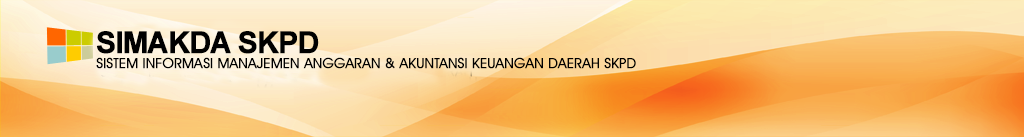
<style>
.page{position:relative;width:1024px;height:137px}
.page>*{position:absolute;margin:0}
.t1{font:30px "Arial-BoldMT";letter-spacing:-0.05em;color:#000000;text-transform:uppercase;font-weight:bold}
.t2{font:14px "AvantGardeITCbyBT-Book";color:#000000;text-transform:uppercase;font-weight:bold}
</style>
<div class="page">
<p class="t1" style="left:96px;top:31px;width:223px;height:23px">SIMAKDA SKPD</p>
<p class="t2" style="left:96px;top:57px;width:540px;height:12px">sistem informasi manajemen anggaran &amp; akuntansi keuangan daerah skpd</p>
</div>
